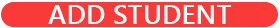
<style>
.page{position:relative;width:280px;height:28px;background:#fa3939}
.page>*{position:absolute;margin:0}
.t1{font:27.3px "YuGothicUI-Semibold";color:#ffffff}
</style>
<div class="page">
<p class="t1" style="left:48px;top:5px;width:183px;height:19px">ADD STUDENT</p>
</div>
